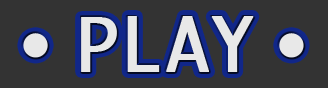
<style>
.page{position:relative;width:328px;height:88px;background:#333333}
.page>*{position:absolute;margin:0}
.t1{font:72px "Ayuthaya";color:#ffffff;font-weight:bold}
</style>
<div class="page">
<p class="t1" style="left:81px;top:16px;width:173px;height:56px">PLAY</p>
</div>
